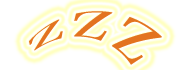
<style>
.page{position:relative;width:190px;height:70px;background:#ffffff}
.page>*{position:absolute;margin:0}
.t1{font:60px "NSimSun";color:#e47320}
</style>
<div class="page">
<p class="t1" style="left:29px;top:11px;width:133px;height:54px">zzz</p>
</div>
